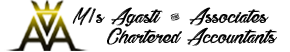
<style>
.page{position:relative;width:290px;height:52px;background:#ffffff}
.page>*{position:absolute;margin:0}
.t1{font:21.7px/4px "BethanieSnakePersonalUseOnly";color:#000000;scale:1.3 1}
</style>
<div class="page">
<p class="t1" style="left:72px;top:7px;width:205px;height:39px;text-align:right">M/s Agasti &amp; Associates <br><br><br><br><br>Chartered Accountants</p>
</div>
